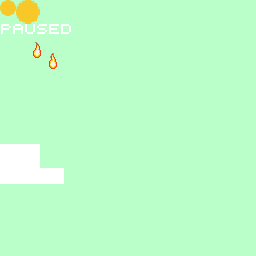
<style>
.page{position:relative;width:256px;height:256px;background:#bafeca}
.page>*{position:absolute;margin:0}
.t1{font:14px "Petyka-RetroComputer___SHORT";color:#ffffff}
</style>
<div class="page">
<p class="t1" style="left:1px;top:24px;width:70px;height:10px">paused</p>
</div>
